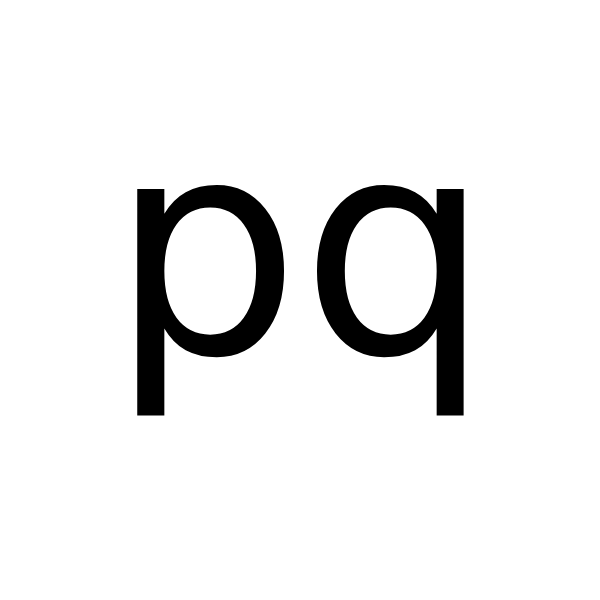
<style>
.page{position:relative;width:600px;height:600px;background:#ffffff}
.page>*{position:absolute;margin:0}
.t1{font:300px "DejaVuSans";color:#000000}
</style>
<div class="page">
<p class="t1" style="left:137px;top:184px;width:327px;height:232px">pq</p>
</div>
